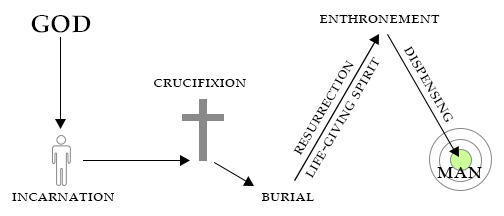
<style>
.page{position:relative;width:504px;height:216px;background:#ffffff}
.page>*{position:absolute;margin:0}
.t1{font:36px "PalatinoLinotype-Roman";color:#000000;font-variant:small-caps}
.t2{font:18px "PalatinoLinotype-Roman";color:#000000;font-variant:small-caps}
.t3{font:18.1px "PalatinoLinotype-Roman";color:#000000;font-variant:small-caps}
.t4{font:24px "PalatinoLinotype-Roman";color:#000000;font-variant:small-caps}
</style>
<div class="page">
<p class="t1" style="left:31px;top:15px;width:60px;height:18px">god</p>
<p class="t2" style="left:319px;top:15px;width:121px;height:8px">enthronement</p>
<p class="t3" style="left:403px;top:45px;width:50px;height:77px;rotate:60deg">dispensing</p>
<p class="t2" style="left:293px;top:60px;width:61px;height:96px;rotate:-60deg">resurrection</p>
<p class="t2" style="left:305px;top:57px;width:75px;height:122px;rotate:-60deg">life-giving spirit</p>
<p class="t2" style="left:154px;top:79px;width:92px;height:8px">crucifixion</p>
<p class="t4" style="left:437px;top:167px;width:45px;height:11px">man</p>
<p class="t2" style="left:12px;top:193px;width:103px;height:8px">incarnation</p>
<p class="t2" style="left:261px;top:193px;width:53px;height:8px">burial</p>
</div>
